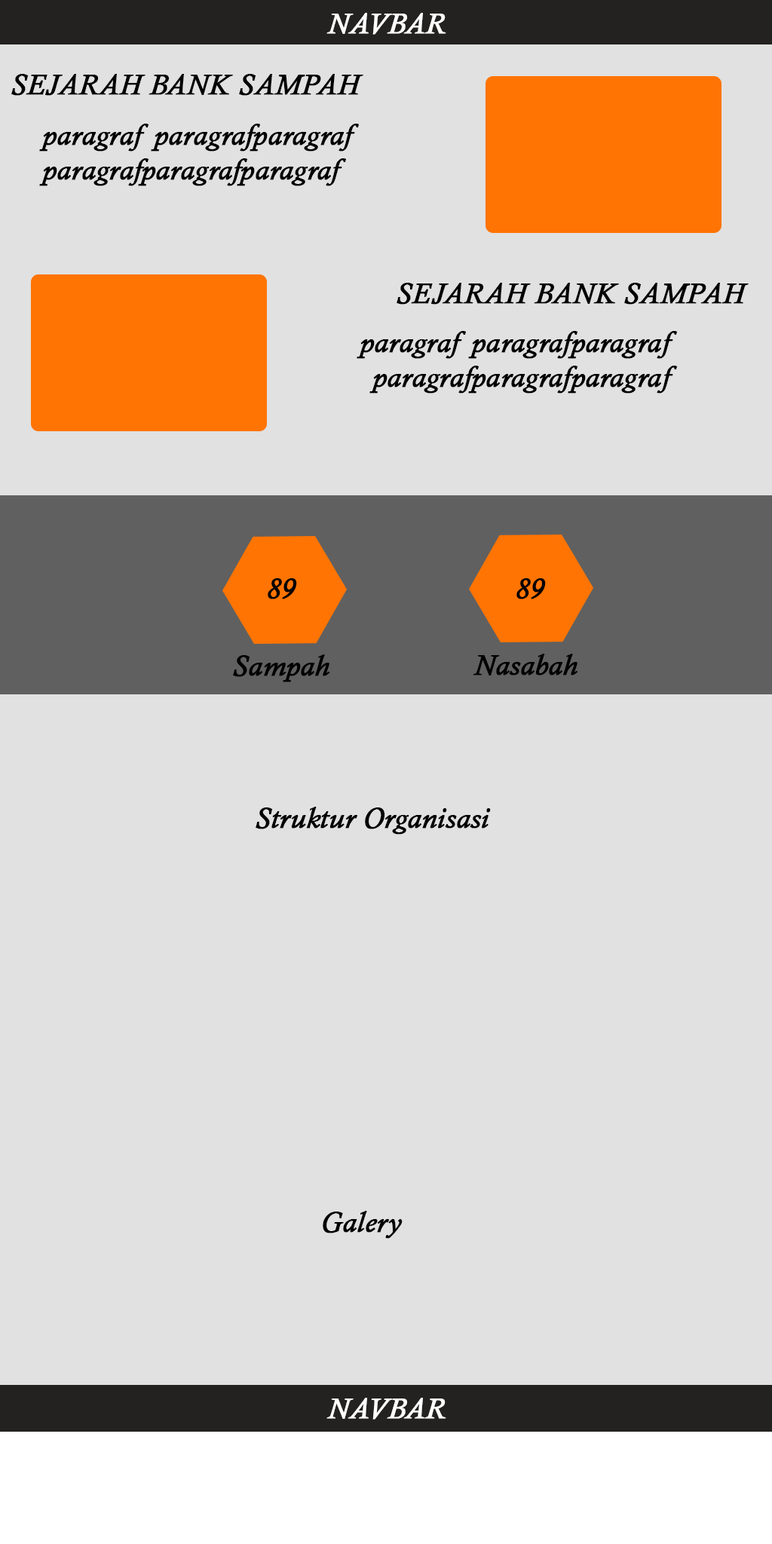
<style>
.page{position:relative;width:772px;height:1544px;background:#e1e1e1}
.page>*{position:absolute;margin:0}
.t1{font:29.1px "CalistoMT-Italic";color:#ffffff;font-weight:bold}
.t2{font:29.1px "CalistoMT-Italic";color:#000000;font-weight:bold}
</style>
<div class="page">
<p class="t1" style="left:327px;top:13px;width:119px;height:22px">NAVBAR</p>
<p class="t2" style="left:11px;top:74px;width:352px;height:22px">SEJARAH BANK SAMPAH</p>
<p class="t2" style="left:39px;top:124px;width:320px;height:62px">paragraf paragrafparagraf<br>paragrafparagrafparagraf</p>
<p class="t2" style="left:397px;top:283px;width:352px;height:22px">SEJARAH BANK SAMPAH</p>
<p class="t2" style="left:357px;top:331px;width:320px;height:63px;text-align:right">paragraf paragrafparagraf<br>paragrafparagrafparagraf</p>
<p class="t2" style="left:268px;top:578px;width:29px;height:21px">89</p>
<p class="t2" style="left:517px;top:578px;width:29px;height:21px">89</p>
<p class="t2" style="left:473px;top:654px;width:105px;height:22px">Nasabah</p>
<p class="t2" style="left:233px;top:655px;width:97px;height:27px">Sampah</p>
<p class="t2" style="left:256px;top:807px;width:235px;height:28px">Struktur Organisasi</p>
<p class="t2" style="left:323px;top:1211px;width:80px;height:28px">Galery</p>
<p class="t1" style="left:327px;top:1398px;width:119px;height:22px">NAVBAR</p>
</div>
